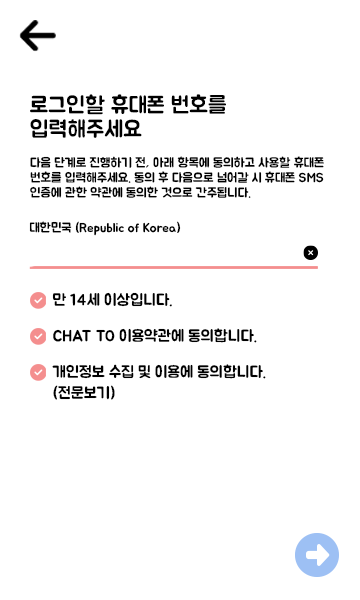
<style>
.page{position:relative;width:360px;height:600px;background:#ffffff}
.page>*{position:absolute;margin:0}
.t1{font:23px/24px "BMJUA";color:#000000}
.t2{font:13px/15px "BMJUA";color:#000000}
.t3{font:13px "BMJUA";color:#000000}
.t4{font:16px "BMJUA";color:#000000}
.t5{font:16px/21px "BMJUA";color:#000000}
</style>
<div class="page">
<p class="t1" style="left:30px;top:94px;width:196px;height:44px">로그인할 휴대폰 번호를 <br>입력해주세요</p>
<p class="t2" style="left:30px;top:156px;width:294px;height:42px">다음 단계로 진행하기 전, 아래 항목에 동의하고 사용할 휴대폰 <br>번호를 입력해주세요. 동의 후 다음으로 넘어갈 시 휴대폰 SMS <br>인증에 관한 약관에 동의한 것으로 간주됩니다.</p>
<p class="t3" style="left:29px;top:221px;width:152px;height:15px">대한민국 (Republic of Korea)</p>
<p class="t4" style="left:52px;top:292px;width:120px;height:15px">만 14세 이상입니다.</p>
<p class="t4" style="left:53px;top:328px;width:204px;height:15px">CHAT TO 이용약관에 동의합니다.</p>
<p class="t5" style="left:52px;top:364px;width:214px;height:36px">개인정보 수집 및 이용에 동의합니다.<br>(전문보기)</p>
</div>
